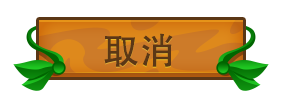
<style>
.page{position:relative;width:287px;height:103px;background:#ffffff}
.page>*{position:absolute;margin:0}
.t1{font:36px "AdobeHeitiStd-Regular";letter-spacing:0.025em;color:#5b3716}
</style>
<div class="page">
<p class="t1" style="left:104px;top:33px;width:69px;height:34px">取消</p>
</div>
